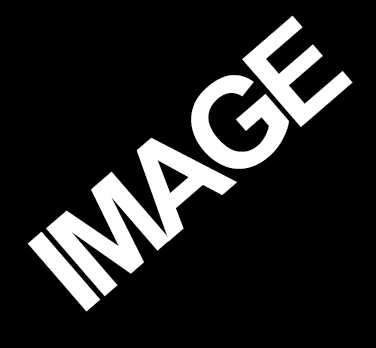
<style>
.page{position:relative;width:376px;height:348px;background:#000000}
.page>*{position:absolute;margin:0}
.t1{font:125.3px "Arial-BoldMT";letter-spacing:-0.09em;color:#ffffff}
</style>
<div class="page">
<p class="t1" style="left:27px;top:15px;width:326px;height:297px;rotate:-41deg">IMAGE</p>
</div>
